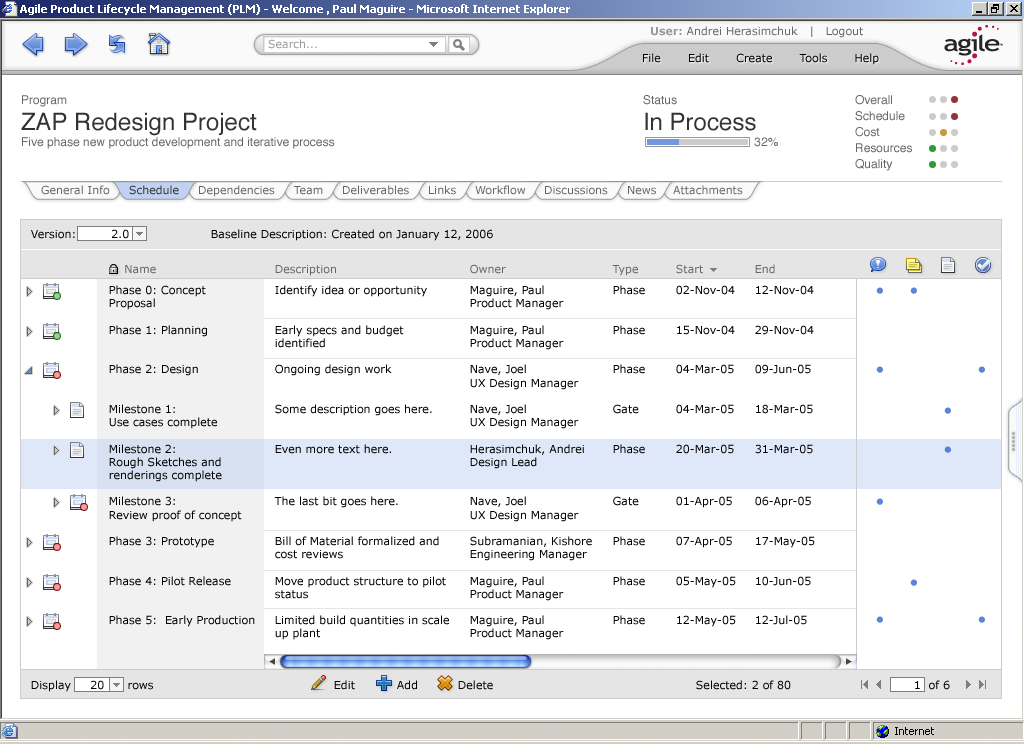
<style>
.page{position:relative;width:1024px;height:744px;background:#ffffff}
.page>*{position:absolute;margin:0}
.t1{font:11px "Verdana";color:#666666}
.t2{font:11px "Verdana-Bold";color:#999999}
.t3{font:11px "Verdana";color:#999999}
.t4{font:11px "Verdana";color:#000000}
.t5{font:12px/16px "Helvetica";color:#666666}
.t6{font:24px/26px "Helvetica";color:#333333}
.t7{font:32px/16px "Helvetica";color:#cccccc}
.t8{font:32px/16px "Helvetica";color:#993333}
.t9{font:32px/16px "Helvetica";color:#cc9933}
.t10{font:32px/16px "Helvetica";color:#339933}
.t11{font:11px "Verdana";color:#333333}
.t12{font:11px/8px "Verdana";color:#666666}
.t13{font:11px/8px "Verdana";color:#000000}
</style>
<div class="page">
<p class="t1" style="left:651px;top:26px;width:212px;height:12px"><span class="t2">User: </span>Andrei Herasimchuk   |   Logout</p>
<p class="t3" style="left:268px;top:39px;width:49px;height:10px">Search...</p>
<p class="t4" style="left:643px;top:53px;width:236px;height:12px">File       Edit       Create       Tools       Help</p>
<p class="t5" style="left:21px;top:95px;width:314px;height:54px">Program<br><span class="t6">ZAP Redesign Project<br></span>Five phase new product development and iterative process</p>
<p class="t6" style="left:643px;top:95px;width:135px;height:52px"><span class="t5">Status<br></span>In Process<br><span class="t5">    32%</span></p>
<p class="t5" style="left:855px;top:95px;width:103px;height:76px">Overall <span class="t7">••</span><span class="t8">•<br></span>Schedule <span class="t7">••</span><span class="t8">•<br></span>Cost  <span class="t7">•</span><span class="t9">•</span><span class="t7">•<br></span>Resources <span class="t10">•</span><span class="t7">••<br></span>Quality <span class="t10">•</span><span class="t7">••</span></p>
<p class="t1" style="left:41px;top:185px;width:69px;height:10px">General Info</p>
<p class="t11" style="left:129px;top:185px;width:50px;height:10px">Schedule</p>
<p class="t1" style="left:199px;top:185px;width:76px;height:12px">Dependencies</p>
<p class="t1" style="left:343px;top:185px;width:66px;height:10px">Deliverables</p>
<p class="t1" style="left:429px;top:185px;width:27px;height:10px">Links</p>
<p class="t1" style="left:475px;top:185px;width:51px;height:10px">Workflow</p>
<p class="t1" style="left:673px;top:185px;width:70px;height:10px">Attachments</p>
<p class="t1" style="left:294px;top:186px;width:29px;height:9px">Team</p>
<p class="t1" style="left:545px;top:186px;width:63px;height:9px">Discussions</p>
<p class="t1" style="left:628px;top:186px;width:28px;height:9px">News</p>
<p class="t4" style="left:31px;top:229px;width:462px;height:12px">Version:         2.0   Baseline Description: Created on January 12, 2006</p>
<p class="t4" style="left:109px;top:265px;width:146px;height:362px"><span class="t1">    N</span><span class="t12">ame<br></span><span class="t13"><br>Pha</span>se 0: Concept<br>Proposal<br><br>Phase 1: Planning<br><br><br>Phase 2: Design<br><br><br>Milestone 1:<br>Use cases complete<br><br>Milestone 2:<br>Rough Sketches and<br>renderings complete<br><br>Milestone 3:<br>Review proof of concept<br><br>Phase 3: Prototype<br><br><br>Phase 4: Pilot Release<br><br><br>Phase 5:  Early Production</p>
<p class="t4" style="left:274px;top:265px;width:175px;height:375px"><span class="t1">De</span><span class="t12">scription<br></span><span class="t13"><br>Identi</span>fy idea or opportunity<br><br><br>Early specs and budget<br>identified<br><br>Ongoing design work<br><br><br>Some description goes here.<br><br><br>Even more text here.<br><br><br><br>The last bit goes here.<br><br><br>Bill of Material formalized and<br>cost reviews<br><br>Move product structure to pilot<br>status<br><br>Limited build quantities in scale<br>up plant</p>
<p class="t4" style="left:470px;top:264px;width:122px;height:376px"><span class="t1">Ow</span><span class="t12">ner<br></span><span class="t13"><br>Magu</span>ire, Paul<br>Product Manager<br><br>Maguire, Paul<br>Product Manager<br><br>Nave, Joel<br>UX Design Manager<br><br>Nave, Joel<br>UX Design Manager<br><br>Herasimchuk, Andrei<br>Design Lead<br><br><br>Nave, Joel<br>UX Design Manager<br><br>Subramanian, Kishore <br>Engineering Manager<br><br>Maguire, Paul<br>Product Manager<br><br>Maguire, Paul<br>Product Manager</p>
<p class="t4" style="left:612px;top:265px;width:33px;height:360px"><span class="t1">T</span><span class="t12">ype<br></span><span class="t13"><br>Phas</span>e<br><br><br>Phase<br><br><br>Phase<br><br><br>Gate<br><br><br>Phase<br><br><br><br>Gate<br><br><br>Phase<br><br><br>Phase<br><br><br>Phase</p>
<p class="t4" style="left:676px;top:264px;width:60px;height:363px"><span class="t1">Sta</span><span class="t12">rt<br></span><span class="t13"><br>02-N</span>ov-04<br><br><br>15-Nov-04<br><br><br>04-Mar-05<br><br><br>04-Mar-05<br><br><br>20-Mar-05<br><br><br><br>01-Apr-05<br><br><br>07-Apr-05<br><br><br>05-May-05<br><br><br>12-May-05</p>
<p class="t4" style="left:755px;top:264px;width:60px;height:361px"><span class="t12">End<br></span><span class="t13"><br>12-N</span>ov-04<br><br><br>29-Nov-04<br><br><br>09-Jun-05<br><br><br>18-Mar-05<br><br><br>31-Mar-05<br><br><br><br>06-Apr-05<br><br><br>17-May-05<br><br><br>10-Jun-05<br><br><br>12-Jul-05</p>
<p class="t4" style="left:31px;top:680px;width:122px;height:12px">Display     20      rows</p>
<p class="t4" style="left:334px;top:680px;width:21px;height:10px">Edit</p>
<p class="t4" style="left:397px;top:680px;width:20px;height:10px">Add</p>
<p class="t4" style="left:458px;top:680px;width:35px;height:10px">Delete</p>
<p class="t4" style="left:696px;top:680px;width:95px;height:10px">Selected: 2 of 80</p>
<p class="t4" style="left:915px;top:680px;width:35px;height:10px">1  of 6</p>
</div>
